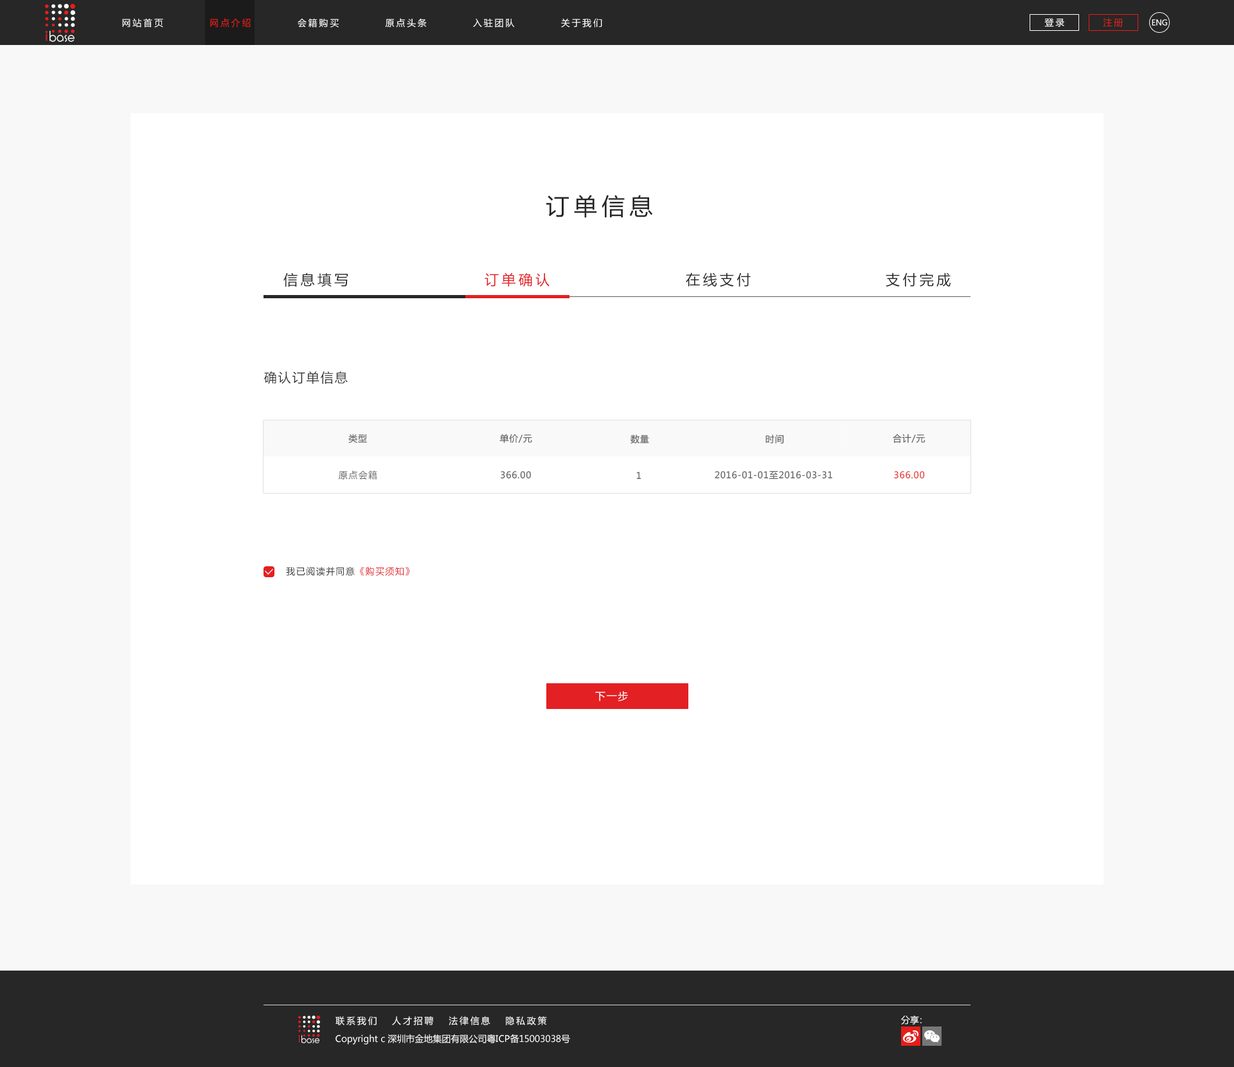
<style>
.page{position:relative;width:1234px;height:1067px;background:#ffffff}
.page>*{position:absolute;margin:0}
.t1{font:9px "MicrosoftYaHei";letter-spacing:0.2em;color:#ffffff}
.t2{font:9px "MicrosoftYaHei";letter-spacing:0.2em;color:#e41e1b}
.t3{font:7.7px "MicrosoftYaHei";letter-spacing:-0.01em;color:#ffffff}
.t4{font:23.1px "MicrosoftYaHei";letter-spacing:0.2em;color:#272727;text-transform:uppercase}
.t5{font:14.1px "MicrosoftYaHei";letter-spacing:0.2em;color:#272727;text-transform:uppercase}
.t6{font:14.1px "MicrosoftYaHei";letter-spacing:0.2em;color:#e32023;text-transform:uppercase}
.t7{font:12.9px "MicrosoftYaHei";letter-spacing:0.1em;color:#373737;text-transform:uppercase}
.t8{font:9px "MicrosoftYaHei";letter-spacing:0.05em;color:#5e5e5e;text-transform:uppercase}
.t9{font:9px "MicrosoftYaHei";letter-spacing:0.1em;color:#5e5e5e;text-transform:uppercase}
.t10{font:9px "MicrosoftYaHei";letter-spacing:0.05em;color:#e63432;text-transform:uppercase}
.t11{font:9px "MicrosoftYaHei";letter-spacing:0.1em;color:#373737;text-transform:uppercase}
.t12{font:9px "MicrosoftYaHei";letter-spacing:0.1em;color:#e32023;text-transform:uppercase}
.t13{font:10.3px "MicrosoftYaHei";letter-spacing:0.1em;color:#ffffff;text-transform:uppercase}
.t14{font:9px "MicrosoftYaHei";letter-spacing:-0.3em;color:#ffffff}
.t15{font:9px "MicrosoftYaHei";color:#ffffff}
</style>
<div class="page">
<p class="t1" style="left:122px;top:18px;width:480px;height:10px">网站首页          <span class="t2">网点介绍</span>          会籍购买          原点头条          入驻团队          关于我们</p>
<p class="t1" style="left:1045px;top:18px;width:20px;height:9px">登录</p>
<p class="t2" style="left:1103px;top:18px;width:20px;height:9px">注册</p>
<p class="t3" style="left:1152px;top:19px;width:15px;height:7px">ENG</p>
<p class="t4" style="left:546px;top:195px;width:107px;height:23px">订单信息</p>
<p class="t5" style="left:283px;top:273px;width:65px;height:14px">信息填写</p>
<p class="t6" style="left:485px;top:273px;width:65px;height:14px">订单确认</p>
<p class="t5" style="left:686px;top:273px;width:65px;height:14px">在线支付</p>
<p class="t5" style="left:886px;top:273px;width:65px;height:14px">支付完成</p>
<p class="t7" style="left:264px;top:371px;width:84px;height:13px">确认订单信息</p>
<p class="t8" style="left:348px;top:434px;width:19px;height:10px">类型</p>
<p class="t8" style="left:499px;top:434px;width:33px;height:10px">单价/元</p>
<p class="t8" style="left:631px;top:435px;width:18px;height:9px">数量</p>
<p class="t8" style="left:766px;top:435px;width:18px;height:9px">时间</p>
<p class="t8" style="left:893px;top:434px;width:33px;height:10px">合计/元</p>
<p class="t9" style="left:339px;top:471px;width:38px;height:9px">原点会籍</p>
<p class="t8" style="left:501px;top:471px;width:30px;height:8px">366.00</p>
<p class="t8" style="left:636px;top:472px;width:6px;height:8px">1</p>
<p class="t8" style="left:715px;top:471px;width:117px;height:9px">2016-01-01至2016-03-31</p>
<p class="t10" style="left:894px;top:471px;width:31px;height:8px">366.00</p>
<p class="t11" style="left:286px;top:567px;width:124px;height:9px">我已阅读并同意<span class="t12">《购买须知》</span></p>
<p class="t13" style="left:595px;top:691px;width:33px;height:10px">下一步</p>
<p class="t1" style="left:336px;top:1016px;width:211px;height:9px">联系我们   人才招聘   法律信息   隐私政策</p>
<p class="t14" style="left:901px;top:1016px;width:21px;height:9px"><span class="t15">分</span>享：</p>
<p class="t15" style="left:336px;top:1034px;width:234px;height:11px">Copyright c 深圳市金地集团有限公司粤ICP备15003038号</p>
</div>
